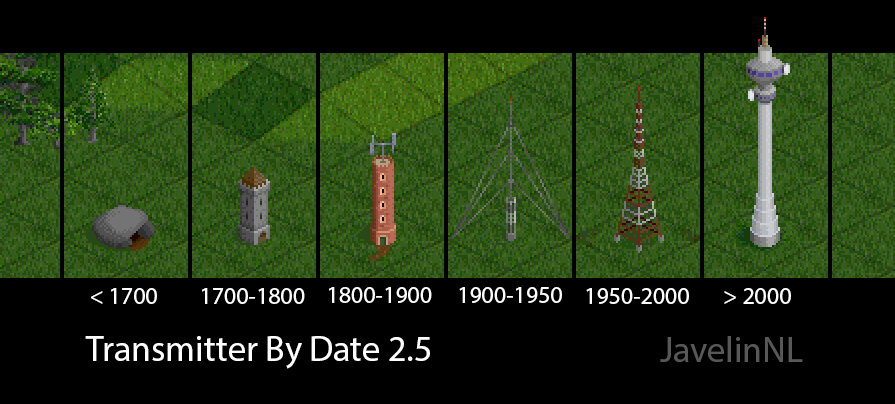
<style>
.page{position:relative;width:895px;height:404px;background:#000000}
.page>*{position:absolute;margin:0}
.t1{font:24px "MyriadPro-Regular";color:#ffffff}
.t2{font:36px "MyriadPro-Regular";color:#ffffff}
.t3{font:36px "MyriadPro-Regular";color:#585858}
</style>
<div class="page">
<p class="t1" style="left:91px;top:288px;width:66px;height:16px">&lt; 1700</p>
<p class="t1" style="left:202px;top:288px;width:103px;height:16px">1700-1800</p>
<p class="t1" style="left:329px;top:287px;width:103px;height:16px">1800-1900</p>
<p class="t1" style="left:459px;top:287px;width:103px;height:16px">1900-1950</p>
<p class="t1" style="left:586px;top:288px;width:103px;height:16px">1950-2000</p>
<p class="t1" style="left:724px;top:288px;width:67px;height:16px">&gt; 2000</p>
<p class="t2" style="left:85px;top:336px;width:345px;height:33px">Transmitter By Date 2.5</p>
<p class="t3" style="left:660px;top:336px;width:143px;height:26px">JavelinNL</p>
</div>
